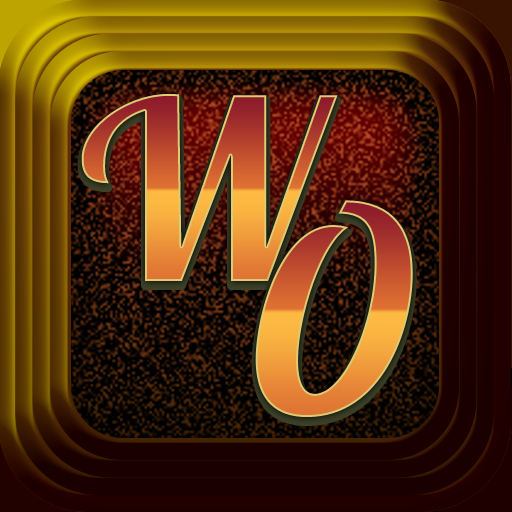
<style>
.page{position:relative;width:512px;height:512px}
.page>*{position:absolute;margin:0}
.t1{font:249.7px "Lobster1.4"}
</style>
<div class="page">
<p class="t1" style="left:81px;top:94px;width:257px;height:187px">W</p>
</div>
